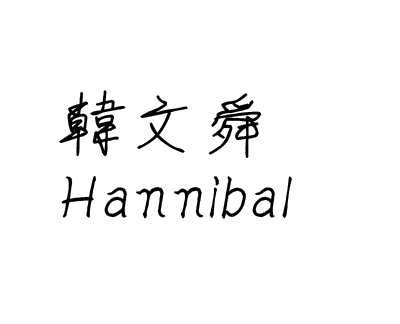
<style>
.page{position:relative;width:400px;height:324px;background:#ffffff}
.page>*{position:absolute;margin:0}
.t1{font:72px "SheideEG-Medium-Big5";color:#000000}
</style>
<div class="page">
<p class="t1" style="left:59px;top:90px;width:203px;height:68px">韓文舜</p>
<p class="t1" style="left:61px;top:176px;width:231px;height:43px">Hannibal</p>
</div>
